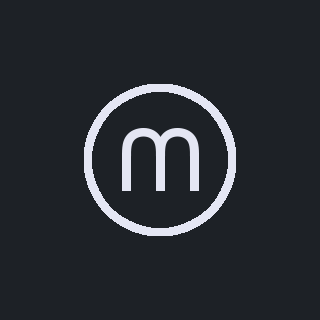
<style>
.page{position:relative;width:320px;height:320px;background:#1d2126}
.page>*{position:absolute;margin:0}
.t1{font:130px "Gidolinya-Regular";color:#e4e6f3}
</style>
<div class="page">
<p class="t1" style="left:122px;top:128px;width:77px;height:63px">m</p>
</div>
